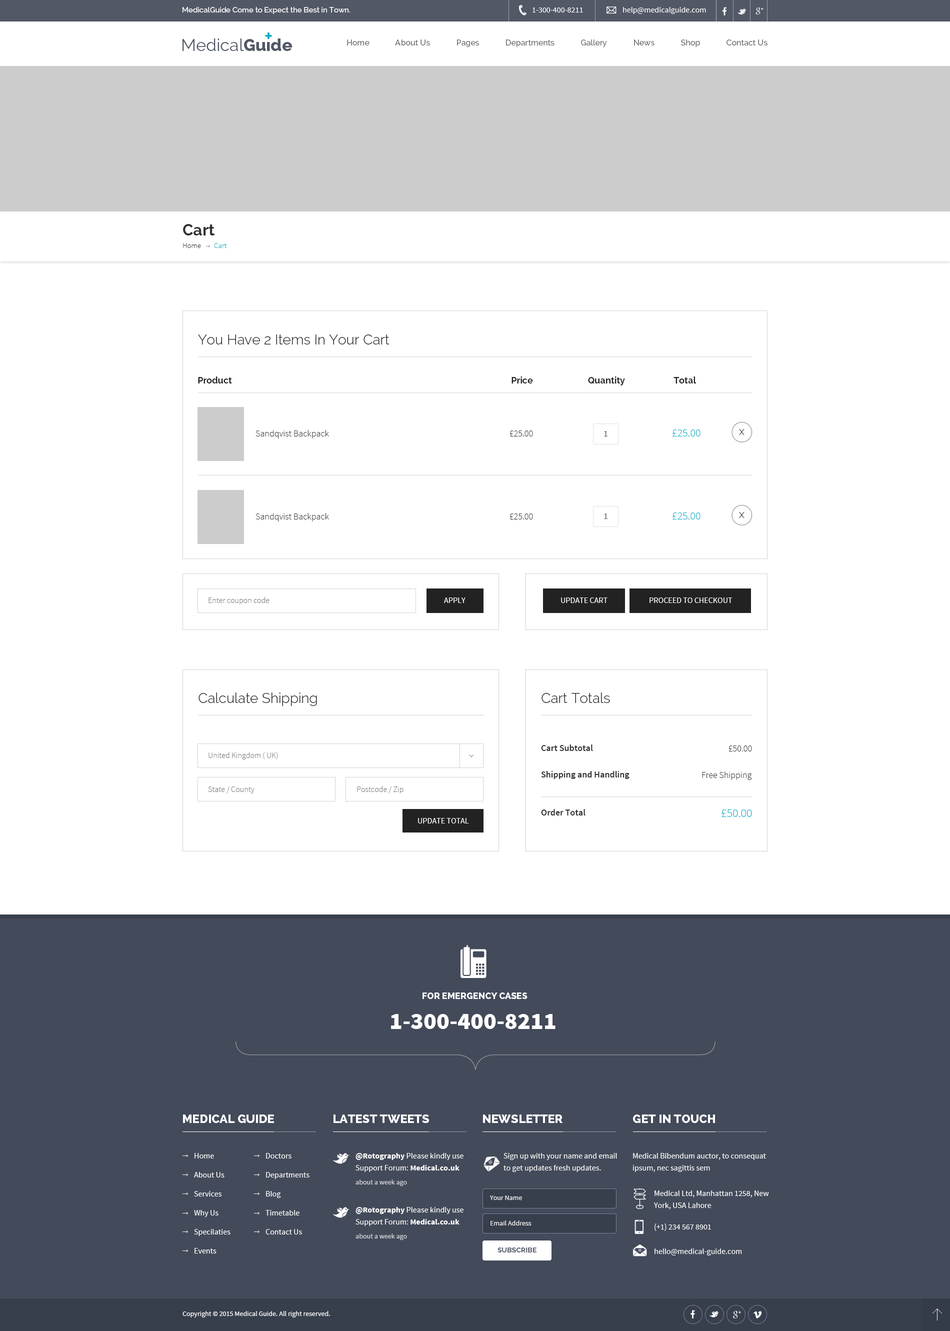
<style>
.page{position:relative;width:950px;height:1331px;background:#ffffff}
.page>*{position:absolute;margin:0}
.t1{font:7.5px "Raleway-Medium";color:#ffffff}
.t2{font:8px "SourceSansPro-Regular";color:#ffffff}
.t3{font:10.1px "invent-communication";color:#ffffff}
.t4{font:8px "Raleway-Medium";color:#707070}
.t5{font:16px "Raleway-Bold";color:#323232}
.t6{font:7.5px "SourceSansPro-Light";color:#333333}
.t7{font:7.5px "SourceSansPro-Light";color:#02adc6}
.t8{font:14px "Raleway-Light";color:#222222}
.t9{font:9px "Raleway-Bold";color:#222222}
.t10{font:9px "SourceSansPro-Light";color:#333333}
.t11{font:9px "SourceSansPro-Regular";color:#5e5e5e}
.t12{font:11px "SourceSansPro-Light";color:#02adc6}
.t13{font:11px "Raleway-Light";color:#222222}
.t14{font:8px "SourceSansPro-Light";color:#797979}
.t15{font:8px "SourceSansPro-Regular";color:#ffffff;text-transform:uppercase}
.t16{font:9px "SourceSansPro-Semibold";color:#333333}
.t17{font:12px "SourceSansPro-Light";color:#02adc6}
.t18{font:35.1px "invent-communication";color:#ffffff}
.t19{font:9px "Raleway-ExtraBold";color:#ffffff;text-transform:uppercase}
.t20{font:24px "SourceSansPro-Black";color:#ffffff}
.t21{font:12px "Raleway-ExtraBold";color:#ffffff;text-transform:uppercase}
.t22{font:8px/19px "SourceSansPro-Regular";color:#ffffff}
.t23{font:8px/12px "SourceSansPro-Regular";color:#ffffff}
.t24{font:8px/12px "SourceSansPro-Bold";color:#ffffff}
.t25{font:7px "SourceSansPro-Regular";color:#d3d4d7}
.t26{font:7px "SourceSansPro-Regular";color:#ffffff}
.t27{font:7px "Raleway-Bold";color:#525866;text-transform:uppercase}
</style>
<div class="page">
<p class="t1" style="left:182px;top:7px;width:168px;height:7px">MedicalGuide Come to Expect the Best in Town.</p>
<p class="t2" style="left:532px;top:8px;width:51px;height:4px">1-300-400-8211</p>
<p class="t3" style="left:606px;top:6px;width:10px;height:8px">(</p>
<p class="t2" style="left:623px;top:7px;width:83px;height:7px">help@medicalguide.com</p>
<p class="t4" style="left:347px;top:40px;width:421px;height:8px">Home             About Us             Pages             Departments             Gallery             News             Shop             Contact Us</p>
<p class="t5" style="left:183px;top:224px;width:31px;height:12px">Cart</p>
<p class="t6" style="left:183px;top:243px;width:18px;height:5px">Home</p>
<p class="t7" style="left:214px;top:243px;width:13px;height:5px">Cart</p>
<p class="t8" style="left:198px;top:334px;width:192px;height:10px">You Have 2 Items In Your Cart</p>
<p class="t9" style="left:198px;top:376px;width:34px;height:8px">Product</p>
<p class="t9" style="left:512px;top:376px;width:21px;height:8px">Price</p>
<p class="t9" style="left:588px;top:376px;width:37px;height:10px">Quantity</p>
<p class="t9" style="left:674px;top:376px;width:22px;height:8px">Total</p>
<p class="t10" style="left:256px;top:430px;width:73px;height:8px">Sandqvist Backpack</p>
<p class="t10" style="left:510px;top:430px;width:23px;height:6px">£25.00</p>
<p class="t11" style="left:604px;top:431px;width:4px;height:5px">1</p>
<p class="t12" style="left:672px;top:430px;width:28px;height:6px">£25.00</p>
<p class="t13" style="left:739px;top:429px;width:5px;height:6px">x</p>
<p class="t10" style="left:256px;top:513px;width:73px;height:9px">Sandqvist Backpack</p>
<p class="t10" style="left:510px;top:514px;width:23px;height:6px">£25.00</p>
<p class="t11" style="left:604px;top:514px;width:4px;height:5px">1</p>
<p class="t12" style="left:672px;top:512px;width:28px;height:8px">£25.00</p>
<p class="t13" style="left:739px;top:512px;width:5px;height:6px">x</p>
<p class="t14" style="left:208px;top:597px;width:62px;height:7px">Enter coupon code</p>
<p class="t15" style="left:444px;top:598px;width:22px;height:5px">apply</p>
<p class="t15" style="left:561px;top:598px;width:47px;height:5px">update cart</p>
<p class="t15" style="left:650px;top:598px;width:82px;height:5px">proceed to checkout</p>
<p class="t8" style="left:198px;top:692px;width:119px;height:14px">Calculate Shipping</p>
<p class="t8" style="left:542px;top:692px;width:68px;height:11px">Cart Totals</p>
<p class="t16" style="left:541px;top:744px;width:52px;height:7px">Cart Subtotal</p>
<p class="t10" style="left:728px;top:746px;width:24px;height:6px">£50.00</p>
<p class="t14" style="left:208px;top:752px;width:70px;height:8px">United Kingdom ( UK)</p>
<p class="t16" style="left:541px;top:771px;width:89px;height:8px">Shipping and Handling</p>
<p class="t10" style="left:702px;top:772px;width:50px;height:8px">Free Shipping</p>
<p class="t14" style="left:208px;top:786px;width:46px;height:8px">State / County</p>
<p class="t14" style="left:357px;top:786px;width:47px;height:8px">Postcode / Zip</p>
<p class="t16" style="left:541px;top:809px;width:45px;height:7px">Order Total</p>
<p class="t17" style="left:722px;top:810px;width:30px;height:7px">£50.00</p>
<p class="t15" style="left:418px;top:818px;width:51px;height:6px">update total</p>
<p class="t18" style="left:460px;top:945px;width:26px;height:33px">0</p>
<p class="t19" style="left:422px;top:992px;width:106px;height:7px">For emergency cases</p>
<p class="t20" style="left:391px;top:1014px;width:165px;height:15px">1-300-400-8211</p>
<p class="t21" style="left:183px;top:1114px;width:91px;height:9px">Medical guide</p>
<p class="t21" style="left:334px;top:1114px;width:95px;height:9px">LATEST TWEETS</p>
<p class="t21" style="left:483px;top:1114px;width:79px;height:9px">NEWSLETTER</p>
<p class="t21" style="left:633px;top:1114px;width:82px;height:9px">GET IN TOUCH</p>
<p class="t22" style="left:194px;top:1153px;width:36px;height:101px">Home<br>About Us<br>Services<br>Why Us<br>Specilaties<br>Events</p>
<p class="t22" style="left:266px;top:1153px;width:44px;height:81px">Doctors<br>Departments<br>Blog<br>Timetable<br>Contact Us</p>
<p class="t23" style="left:356px;top:1153px;width:108px;height:19px"><span class="t24">@Rotography</span> Please kindly use <br>Support Forum: <span class="t24">Medical.co.uk</span></p>
<p class="t23" style="left:504px;top:1153px;width:113px;height:19px">Sign up with your name and email<br>to get updates fresh updates.</p>
<p class="t23" style="left:633px;top:1153px;width:133px;height:19px">Medical Bibendum auctor, to consequat<br>ipsum, nec sagittis sem</p>
<p class="t25" style="left:356px;top:1180px;width:51px;height:6px">about a week ago</p>
<p class="t23" style="left:654px;top:1190px;width:115px;height:20px">Medical Ltd, Manhattan 1258, New<br>York, USA Lahore</p>
<p class="t26" style="left:490px;top:1196px;width:32px;height:4px;opacity:0.9">Your Name</p>
<p class="t23" style="left:356px;top:1207px;width:108px;height:19px"><span class="t24">@Rotography</span> Please kindly use <br>Support Forum: <span class="t24">Medical.co.uk</span></p>
<p class="t26" style="left:490px;top:1220px;width:42px;height:6px;opacity:0.9">Email Address</p>
<p class="t2" style="left:654px;top:1224px;width:57px;height:7px">(+1) 234 567 8901</p>
<p class="t25" style="left:356px;top:1234px;width:51px;height:6px">about a week ago</p>
<p class="t27" style="left:498px;top:1248px;width:38px;height:4px">subscribe</p>
<p class="t2" style="left:654px;top:1248px;width:88px;height:8px">hello@medical-guide.com</p>
<p class="t26" style="left:182px;top:1311px;width:148px;height:7px">Copyright © 2015 Medical Guide. All right reserved.</p>
</div>
